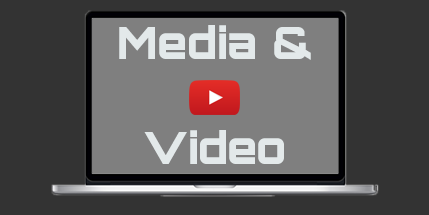
<style>
.page{position:relative;width:429px;height:215px;background:#333333}
.page>*{position:absolute;margin:0}
.t1{font:44px "Orbitron-Black";color:#e3e9ea}
</style>
<div class="page">
<p class="t1" style="left:119px;top:25px;width:192px;height:139px;text-align:center">Media &amp;<br><br>Video</p>
</div>
